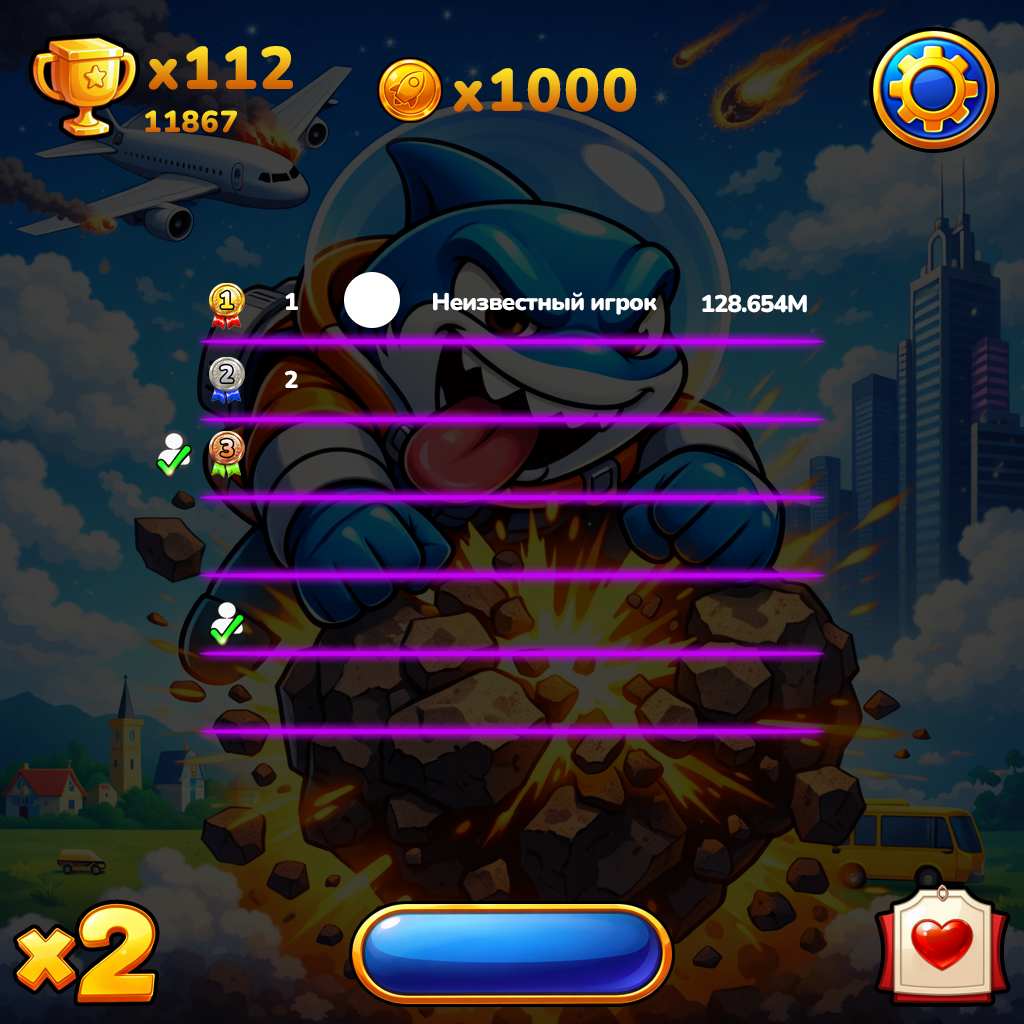
<style>
.page{position:relative;width:1024px;height:1024px}
.page>*{position:absolute;margin:0}
.t1{font:60px "Nunito-Black";letter-spacing:0.04em}
.t2{font:30px "Nunito-Black";letter-spacing:0.04em}
.t3{font:24px "Nunito-Black";letter-spacing:-0.04em;color:#ffffff}
</style>
<div class="page">
<p class="t1" style="left:148px;top:46px;width:145px;height:44px">x112</p>
<p class="t1" style="left:453px;top:68px;width:184px;height:44px">x1000</p>
<p class="t2" style="left:145px;top:110px;width:92px;height:23px">11867</p>
<p class="t3" style="left:285px;top:292px;width:13px;height:18px">1</p>
<p class="t3" style="left:433px;top:292px;width:224px;height:23px">Неизвестный игрок</p>
<p class="t3" style="left:702px;top:294px;width:105px;height:19px">128.654М</p>
<p class="t3" style="left:285px;top:370px;width:13px;height:18px">2</p>
</div>
